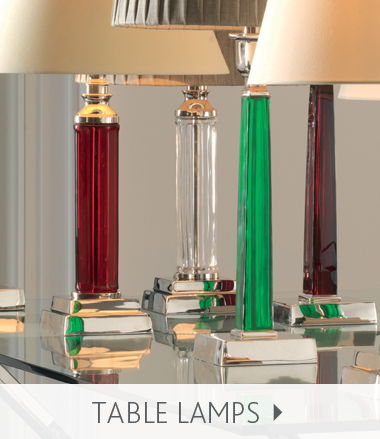
<style>
.page{position:relative;width:380px;height:439px}
.page>*{position:absolute;margin:0}
.t1{font:31.1px "BlissPro-ExtraLight";color:#585d60}
</style>
<div class="page">
<p class="t1" style="left:92px;top:402px;width:167px;height:21px">TABLE LAMPS</p>
</div>
